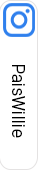
<style>
.page{position:relative;width:38px;height:170px;background:#ffffff}
.page>*{position:absolute;margin:0}
.t1{font:18.2px "SFCompactDisplay-Regular";color:#000000}
</style>
<div class="page">
<p class="t1" style="left:12px;top:65px;width:13px;height:73px;rotate:90deg">PaisWillie</p>
</div>
